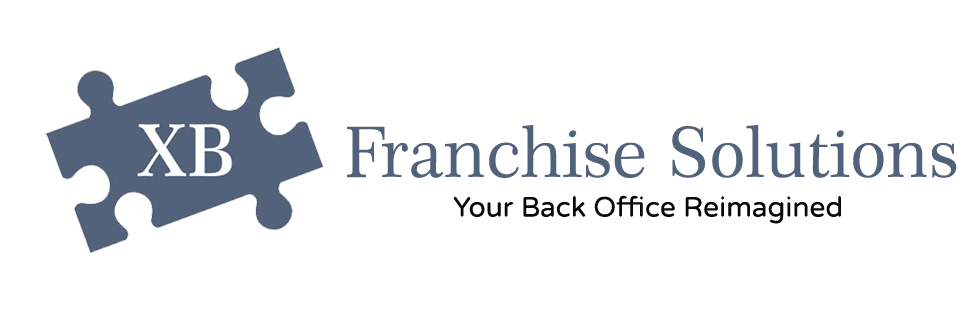
<style>
.page{position:relative;width:980px;height:314px;background:#ffffff}
.page>*{position:absolute;margin:0}
.t1{font:70px "Century751BT-RomanB";color:#52627b}
.t2{font:28px "VarelaRound";color:#080808}
</style>
<div class="page">
<p class="t1" style="left:347px;top:124px;width:610px;height:54px">Franchise Solutions</p>
<p class="t2" style="left:453px;top:195px;width:388px;height:29px">Your Back Office Reimagined</p>
</div>
